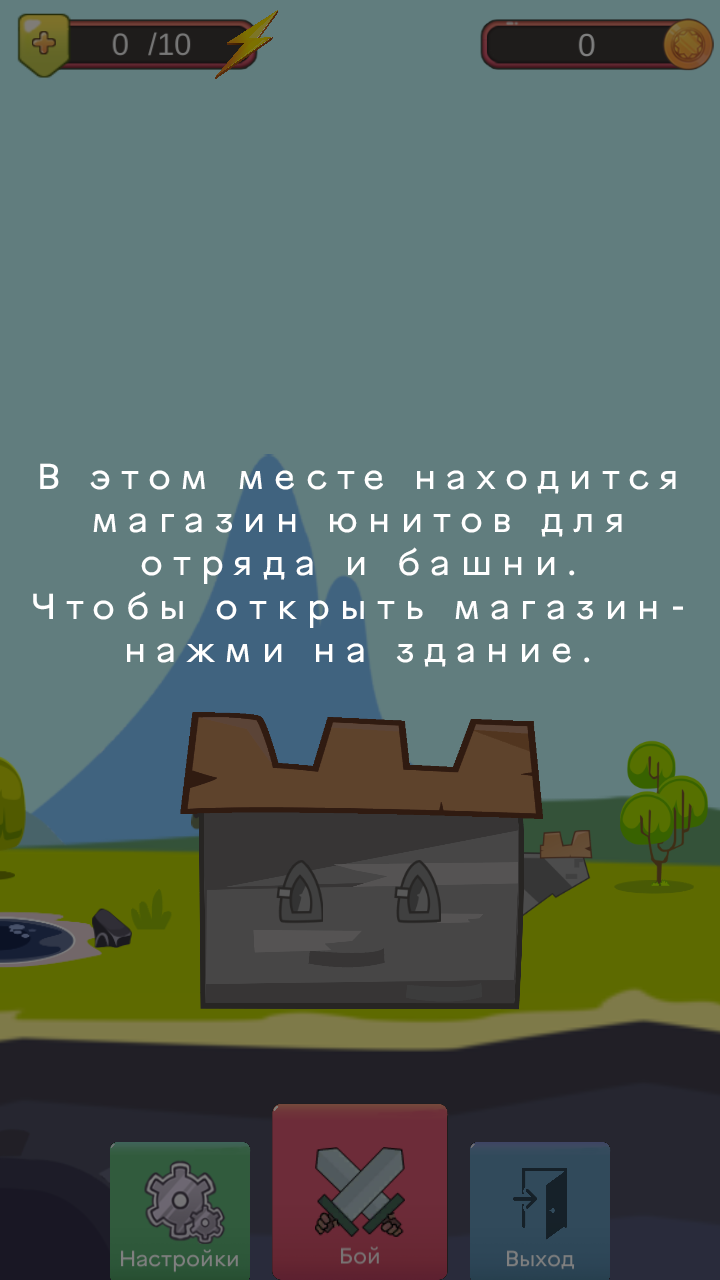
<style>
.page{position:relative;width:720px;height:1280px;background:#617d7e}
.page>*{position:absolute;margin:0}
.t1{font:36px "VinnytsiaSansReg";letter-spacing:0.28em;color:#ffffff}
</style>
<div class="page">
<p class="t1" style="left:33px;top:463px;width:650px;height:204px;text-align:center">В этом месте находится магазин юнитов для отряда и башни.<br>Чтобы открыть магазин- нажми на здание.</p>
</div>
